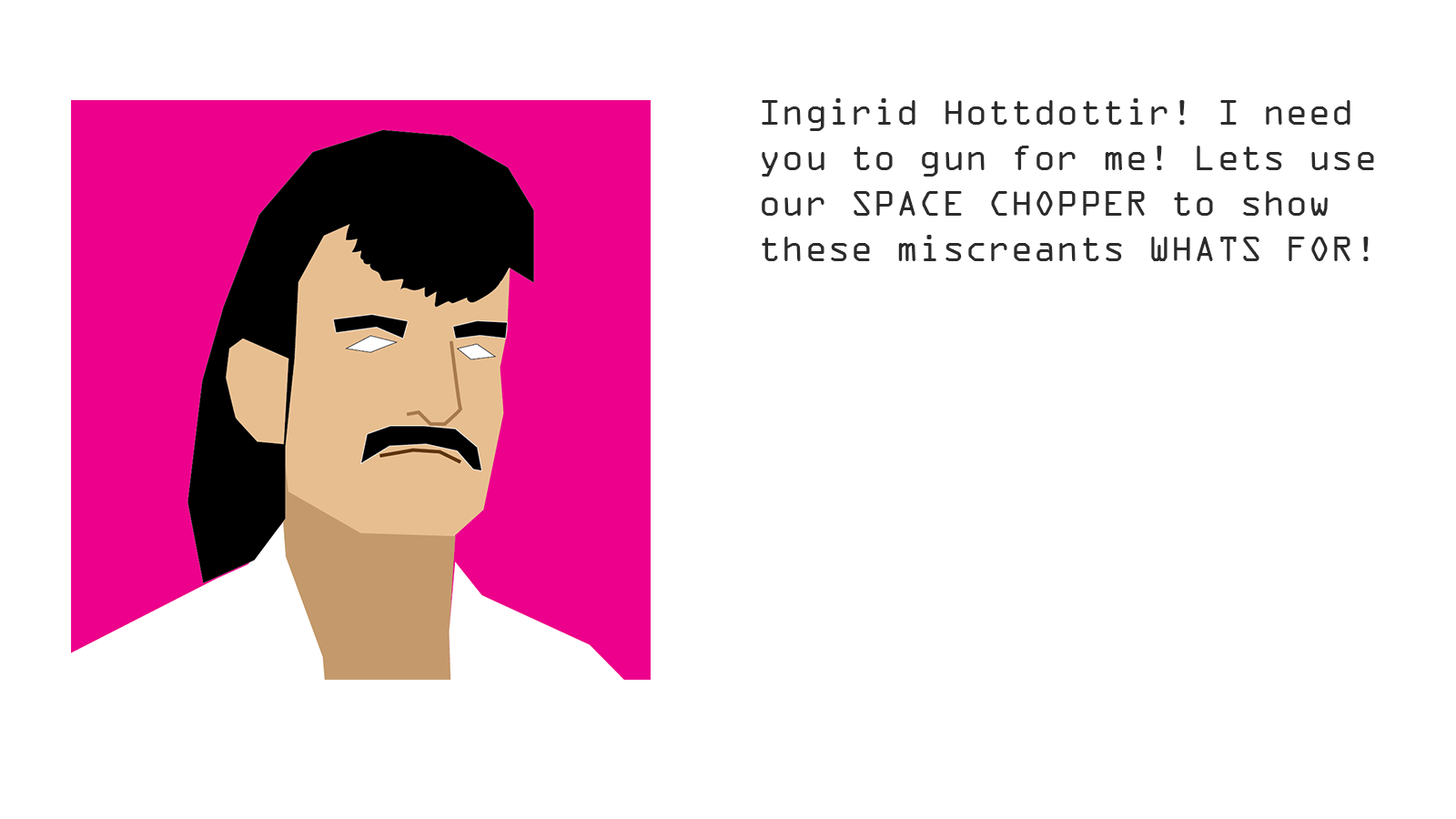
<style>
.page{position:relative;width:1456px;height:819px;background:#ffffff}
.page>*{position:absolute;margin:0}
.t1{font:37.9px "OCRAExtended";color:#2b2b2b}
</style>
<div class="page">
<p class="t1" style="left:762px;top:98px;width:612px;height:163px">Ingirid Hottdottir! I need you to gun for me! Lets use our SPACE CHOPPER to show these miscreants WHATS FOR!</p>
</div>
